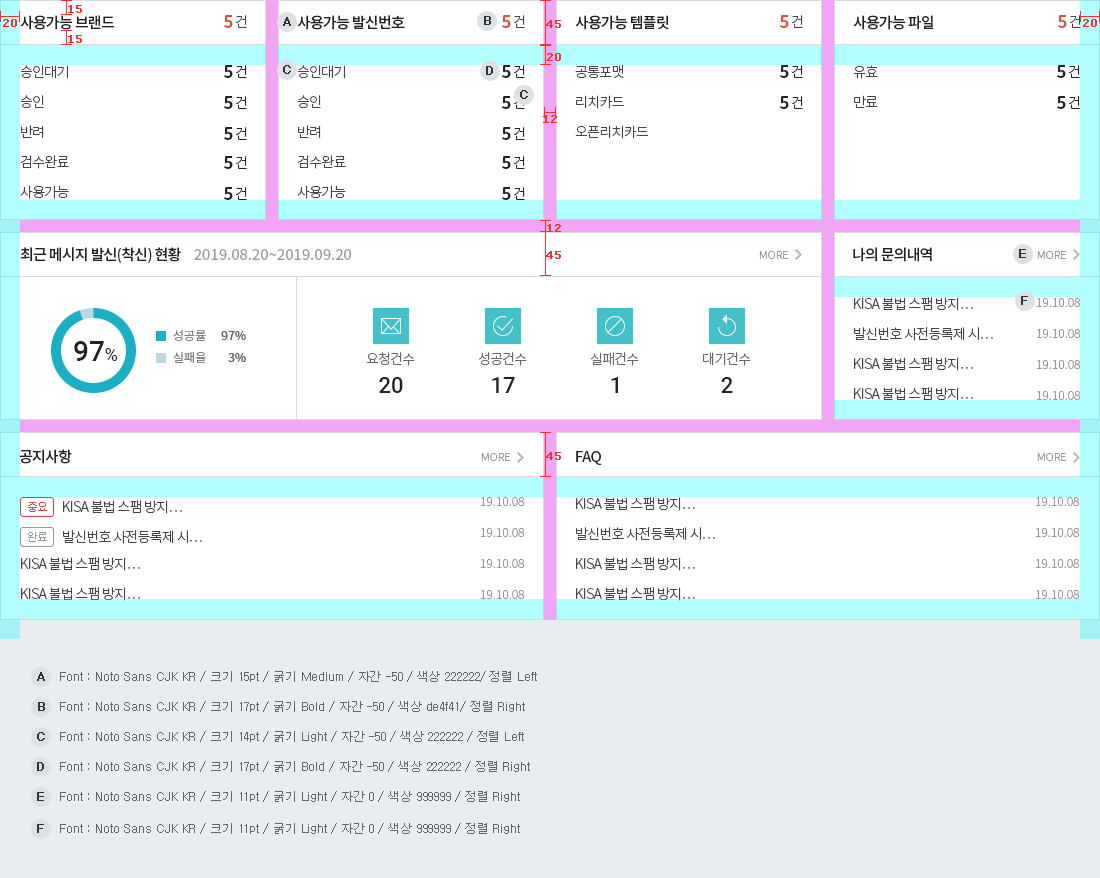
<style>
.page{position:relative;width:1100px;height:878px;background:#ffffff}
.page>*{position:absolute;margin:0}
.t1{font:15px "NotoSansCJKkr-Medium";letter-spacing:-0.05em;color:#222222}
.t2{font:17px "NotoSansCJKkr-Bold";letter-spacing:-0.05em;color:#de4f41}
.t3{font:14px "NotoSansCJKkr-Light";letter-spacing:-0.05em;color:#444444}
.t4{font:14px/30px "NotoSansCJKkr-Light";letter-spacing:-0.05em;color:#444444}
.t5{font:17px/31px "NotoSansCJKkr-Bold";letter-spacing:-0.05em;color:#222222}
.t6{font:14px/31px "NotoSansCJKkr-Light";letter-spacing:-0.05em;color:#222222}
.t7{font:15px "NotoSansCJKkr-Regular";color:#999999}
.t8{font:11px "NotoSansCJKkr-Light";color:#999999}
.t9{font:12px/31px "NotoSansCJKkr-Light";color:#999999}
.t10{font:28px "Roboto-Medium";color:#222222}
.t11{font:18px "Roboto-Regular";color:#222222}
.t12{font:12px/22px "NotoSansCJKkr-Light";color:#666666;text-transform:uppercase}
.t13{font:12px/22px "NotoSansCJKkr-Medium";color:#666666;text-transform:uppercase}
.t14{font:14px "NotoSansCJKkr-Light";letter-spacing:-0.05em;color:#666666}
.t15{font:22px "Roboto-Medium";color:#222222}
.t16{font:11px "Dotum";letter-spacing:-0.08em;color:#d04444}
.t17{font:11px "Dotum";letter-spacing:-0.08em;color:#999999}
.t18{font:12px "Dotum";color:#323232;font-weight:bold}
.t19{font:12px "Dotum";color:#666666}
.t20{font:12px "Dotum";color:#323232;text-transform:uppercase;font-weight:bold}
</style>
<div class="page">
<p class="t1" style="left:20px;top:15px;width:95px;height:15px">사용가능 브랜드</p>
<p class="t2" style="left:223px;top:15px;width:24px;height:13px">5 <span class="t3">건</span></p>
<p class="t1" style="left:297px;top:15px;width:108px;height:15px">사용가능 발신번호</p>
<p class="t2" style="left:501px;top:15px;width:24px;height:13px">5 <span class="t3">건</span></p>
<p class="t1" style="left:575px;top:15px;width:94px;height:15px">사용가능 템플릿</p>
<p class="t2" style="left:779px;top:15px;width:24px;height:13px">5 <span class="t3">건</span></p>
<p class="t1" style="left:853px;top:15px;width:81px;height:15px">사용가능 파일</p>
<p class="t2" style="left:1057px;top:15px;width:24px;height:13px">5 <span class="t3">건</span></p>
<p class="t4" style="left:20px;top:65px;width:49px;height:134px">승인대기<br>승인<br>반려<br>검수완료<br>사용가능</p>
<p class="t5" style="left:223px;top:65px;width:24px;height:75px;text-align:right">5 <span class="t6">건<br></span>5 <span class="t6">건<br></span>5 <span class="t6">건</span></p>
<p class="t4" style="left:297px;top:65px;width:49px;height:134px">승인대기<br>승인<br>반려<br>검수완료<br>사용가능</p>
<p class="t5" style="left:501px;top:65px;width:24px;height:75px;text-align:right">5 <span class="t6">건<br></span>5 <span class="t6">건<br></span>5 <span class="t6">건</span></p>
<p class="t4" style="left:575px;top:65px;width:74px;height:74px">공통포맷<br>리치카드<br>오픈리치카드</p>
<p class="t5" style="left:779px;top:65px;width:24px;height:44px;text-align:right">5 <span class="t6">건<br></span>5 <span class="t6">건</span></p>
<p class="t4" style="left:853px;top:65px;width:25px;height:43px">유효<br>만료</p>
<p class="t5" style="left:1056px;top:65px;width:24px;height:44px;text-align:right">5 <span class="t6">건<br></span>5 <span class="t6">건</span></p>
<p class="t5" style="left:223px;top:156px;width:24px;height:44px;text-align:right">5 <span class="t6">건<br></span>5 <span class="t6">건</span></p>
<p class="t5" style="left:501px;top:156px;width:24px;height:44px;text-align:right">5 <span class="t6">건<br></span>5 <span class="t6">건</span></p>
<p class="t7" style="left:20px;top:247px;width:331px;height:16px"><span class="t1">최근 메시지 발신(착신) 현황     </span>2019.08.20~2019.09.20</p>
<p class="t8" style="left:759px;top:251px;width:29px;height:8px">MORE</p>
<p class="t1" style="left:853px;top:247px;width:79px;height:15px">나의 문의내역</p>
<p class="t8" style="left:1037px;top:251px;width:29px;height:8px">MORE</p>
<p class="t4" style="left:854px;top:297px;width:139px;height:104px">KISA 불법 스팸 방지…<br>발신번호 사전등록제 시…<br>KISA 불법 스팸 방지…<br>KISA 불법 스팸 방지…</p>
<p class="t9" style="left:1036px;top:298px;width:45px;height:102px">19.10.08<br>19.10.08<br>19.10.08<br>19.10.08</p>
<p class="t10" style="left:74px;top:341px;width:44px;height:20px">97<span class="t11">%</span></p>
<p class="t12" style="left:173px;top:330px;width:73px;height:33px;text-align:justify">성공률 <span class="t13">97%<br></span>실패율 <span class="t13">3%</span></p>
<p class="t14" style="left:366px;top:352px;width:49px;height:14px">요청건수</p>
<p class="t14" style="left:479px;top:352px;width:48px;height:14px">성공건수</p>
<p class="t14" style="left:590px;top:352px;width:49px;height:14px">실패건수</p>
<p class="t14" style="left:703px;top:352px;width:48px;height:14px">대기건수</p>
<p class="t15" style="left:379px;top:377px;width:24px;height:16px">20</p>
<p class="t15" style="left:492px;top:377px;width:23px;height:16px">17</p>
<p class="t15" style="left:611px;top:377px;width:7px;height:16px">1</p>
<p class="t15" style="left:721px;top:377px;width:12px;height:16px">2</p>
<p class="t1" style="left:19px;top:449px;width:53px;height:15px">공지사항</p>
<p class="t8" style="left:481px;top:453px;width:29px;height:8px">MORE</p>
<p class="t1" style="left:576px;top:451px;width:26px;height:14px">FAQ</p>
<p class="t8" style="left:1037px;top:453px;width:29px;height:8px">MORE</p>
<p class="t9" style="left:480px;top:497px;width:45px;height:102px">19.10.08<br>19.10.08<br>19.10.08<br>19.10.08</p>
<p class="t4" style="left:576px;top:497px;width:139px;height:104px">KISA 불법 스팸 방지…<br>발신번호 사전등록제 시…<br>KISA 불법 스팸 방지…<br>KISA 불법 스팸 방지…</p>
<p class="t9" style="left:1035px;top:497px;width:45px;height:102px">19.10.08<br>19.10.08<br>19.10.08<br>19.10.08</p>
<p class="t16" style="left:28px;top:502px;width:19px;height:10px">중요</p>
<p class="t4" style="left:63px;top:500px;width:139px;height:44px">KISA 불법 스팸 방지…<br>발신번호 사전등록제 시…</p>
<p class="t17" style="left:28px;top:532px;width:19px;height:10px">완료</p>
<p class="t4" style="left:21px;top:557px;width:119px;height:44px">KISA 불법 스팸 방지…<br>KISA 불법 스팸 방지…</p>
<p class="t18" style="left:37px;top:672px;width:8px;height:9px">A</p>
<p class="t19" style="left:60px;top:671px;width:477px;height:11px">Font : Noto Sans CJK KR / 크기 15pt / 굵기 Medium / 자간 -50 / 색상 222222/ 정렬 Left</p>
<p class="t18" style="left:38px;top:702px;width:7px;height:9px">B</p>
<p class="t19" style="left:60px;top:701px;width:465px;height:11px">Font : Noto Sans CJK KR / 크기 17pt / 굵기 Bold / 자간 -50 / 색상 de4f41/ 정렬 Right</p>
<p class="t20" style="left:37px;top:732px;width:8px;height:9px">c</p>
<p class="t19" style="left:60px;top:731px;width:464px;height:11px">Font : Noto Sans CJK KR / 크기 14pt / 굵기 Light / 자간 -50 / 색상 222222 / 정렬 Left</p>
<p class="t19" style="left:60px;top:761px;width:470px;height:11px">Font : Noto Sans CJK KR / 크기 17pt / 굵기 Bold / 자간 -50 / 색상 222222 / 정렬 Right</p>
<p class="t20" style="left:37px;top:762px;width:7px;height:9px">d</p>
<p class="t20" style="left:37px;top:792px;width:7px;height:9px">e</p>
<p class="t19" style="left:60px;top:791px;width:460px;height:11px">Font : Noto Sans CJK KR / 크기 11pt / 굵기 Light / 자간 0 / 색상 999999 / 정렬 Right</p>
<p class="t20" style="left:37px;top:824px;width:7px;height:9px">F</p>
<p class="t19" style="left:60px;top:823px;width:460px;height:11px">Font : Noto Sans CJK KR / 크기 11pt / 굵기 Light / 자간 0 / 색상 999999 / 정렬 Right</p>
</div>
